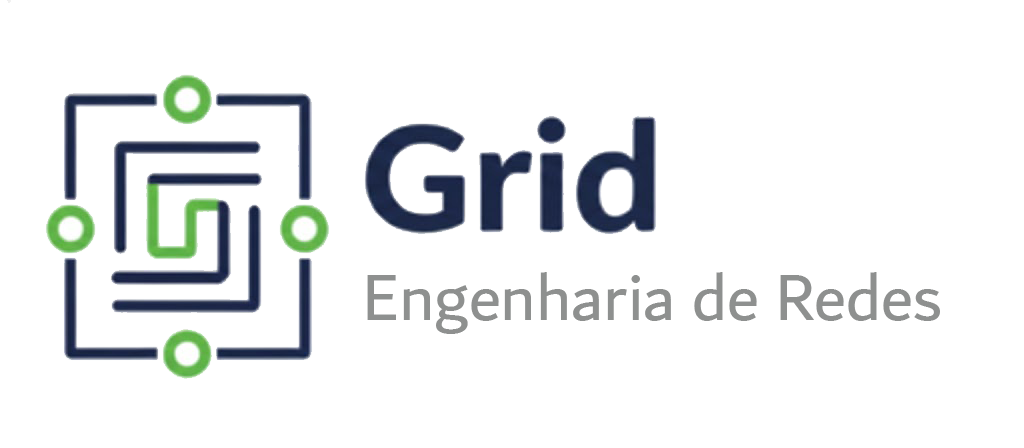
<style>
.page{position:relative;width:1024px;height:448px;background:#ffffff}
.page>*{position:absolute;margin:0}
.t1{font:68.6px "Dubai-Regular";color:#8e908f}
</style>
<div class="page">
<p class="t1" style="left:367px;top:272px;width:573px;height:62px">Engenharia de Redes</p>
</div>
